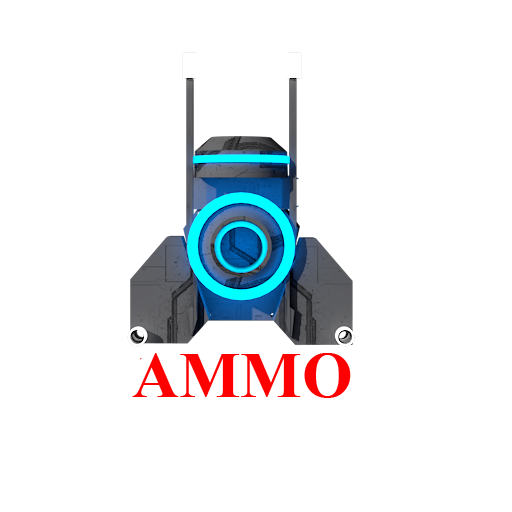
<style>
.page{position:relative;width:512px;height:512px;background:#ffffff}
.page>*{position:absolute;margin:0}
.t1{font:65px "TimesNewRomanPS-BoldMT";color:#ff0000}
</style>
<div class="page">
<p class="t1" style="left:132px;top:353px;width:219px;height:45px">AMMO</p>
</div>
